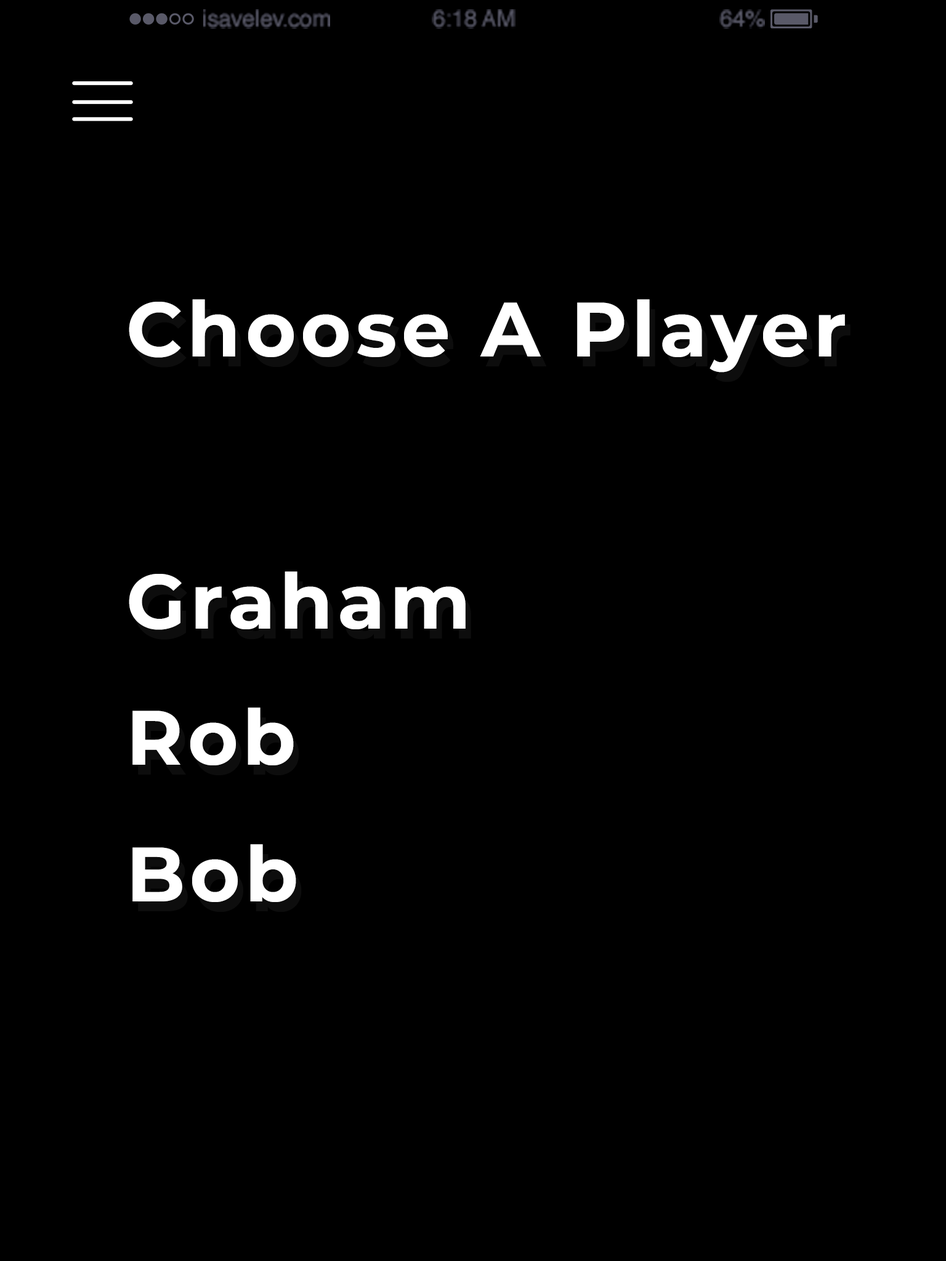
<style>
.page{position:relative;width:946px;height:1261px;background:#000000}
.page>*{position:absolute;margin:0}
.t1{font:22.7px "Helvetica";color:#595968}
.t2{font:77px/136.1px "Montserrat-Bold";letter-spacing:0.06em;color:#ffffff}
</style>
<div class="page">
<p class="t1" style="left:203px;top:9px;width:127px;height:20px">isavelev.com</p>
<p class="t1" style="left:432px;top:9px;width:83px;height:20px">6:18 AM</p>
<p class="t1" style="left:719px;top:9px;width:46px;height:20px">64%</p>
<p class="t2" style="left:129px;top:299px;width:716px;height:603px">Choose A Player<br><br>Graham<br>Rob<br>Bob</p>
</div>
